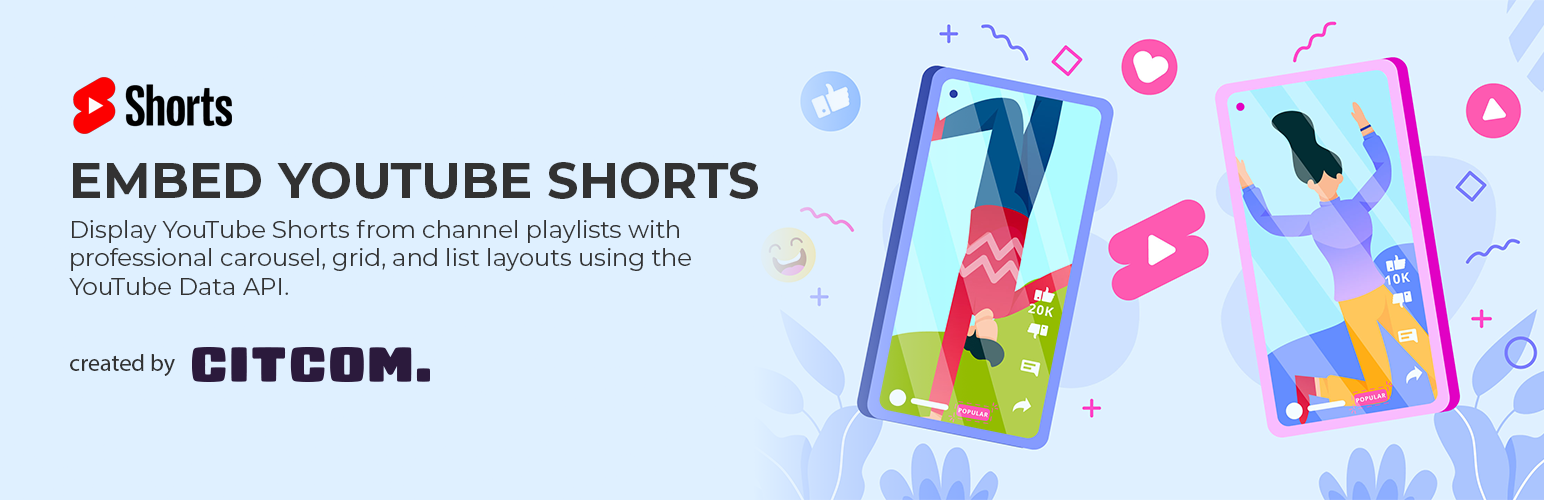
<style>
.page{position:relative;width:1544px;height:500px;background:#dff0ff}
.page>*{position:absolute;margin:0}
.t1{font:50px "Montserrat-Bold";color:#323232;text-transform:uppercase}
.t2{font:24px "Montserrat-Regular";color:#323232}
.t3{font:24px "MyriadPro-Regular";color:#323232}
</style>
<div class="page">
<p class="t1" style="left:73px;top:162px;width:685px;height:37px">EMBED YOUTUBE SHORTS</p>
<p class="t2" style="left:69px;top:220px;width:622px;height:75px">Display YouTube Shorts from channel playlists with professional carousel, grid, and list layouts using the YouTube Data API.</p>
<p class="t3" style="left:70px;top:354px;width:105px;height:22px">created by</p>
</div>
